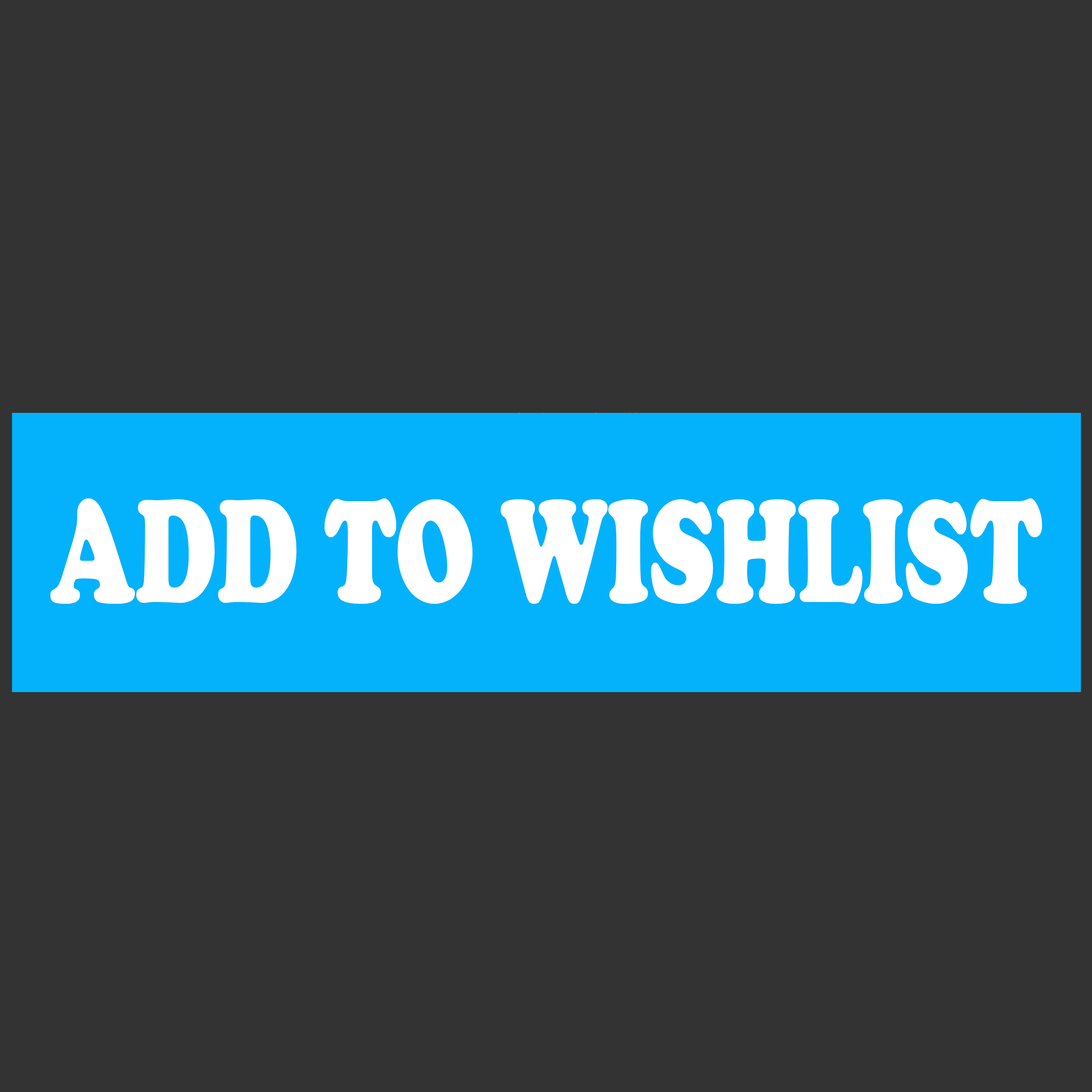
<style>
.page{position:relative;width:1092px;height:1092px;background:#333333}
.page>*{position:absolute;margin:0}
.t1{font:151.5px "CooperBlack";color:#ffffff;scale:0.67 1}
</style>
<div class="page">
<p class="t1" style="left:50px;top:498px;width:992px;height:106px">ADD TO WISHLIST</p>
</div>
